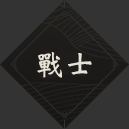
<style>
.page{position:relative;width:129px;height:129px;background:#333333}
.page>*{position:absolute;margin:0}
.t1{font:30px "WeibeiTC-Bold";color:#e8e3d6}
</style>
<div class="page">
<p class="t1" style="left:37px;top:52px;width:55px;height:26px">戰士</p>
</div>
